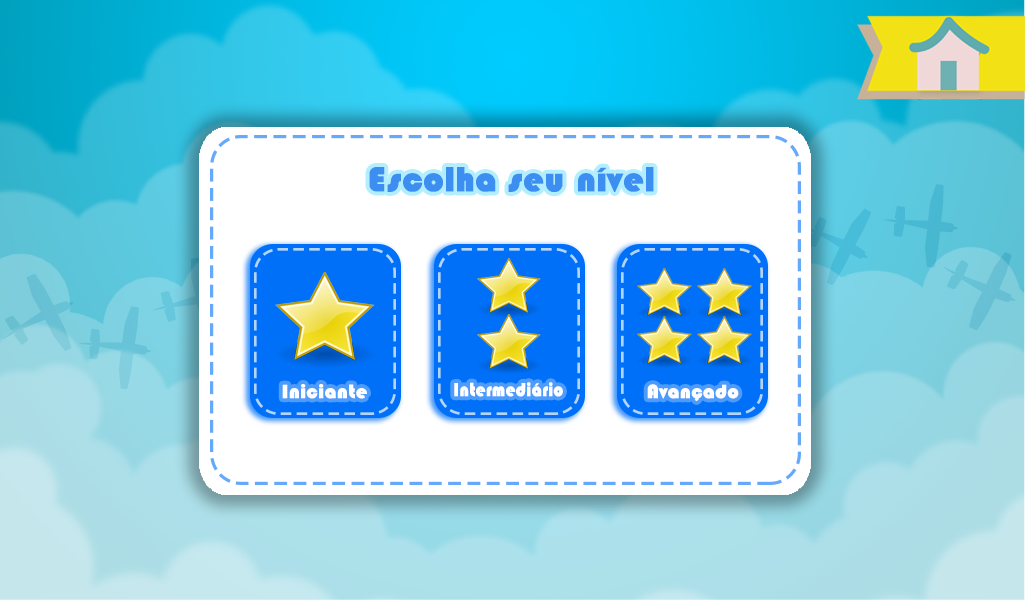
<style>
.page{position:relative;width:1025px;height:600px;background:#ffffff}
.page>*{position:absolute;margin:0}
.t1{font:36px "Blippo-Heavy";color:#3c8ef0;font-weight:bold}
.t2{font:20px "Blippo-Heavy";color:#ffffff;font-weight:bold}
.t3{font:19.6px "Blippo-Heavy";color:#ffffff;font-weight:bold;scale:0.88 1}
</style>
<div class="page">
<p class="t1" style="left:369px;top:167px;width:285px;height:25px">Escolha seu nível</p>
<p class="t2" style="left:282px;top:384px;width:85px;height:15px">Iniciante</p>
<p class="t3" style="left:454px;top:382px;width:109px;height:15px">Intermediário</p>
<p class="t2" style="left:647px;top:384px;width:92px;height:17px">Avançado</p>
</div>
